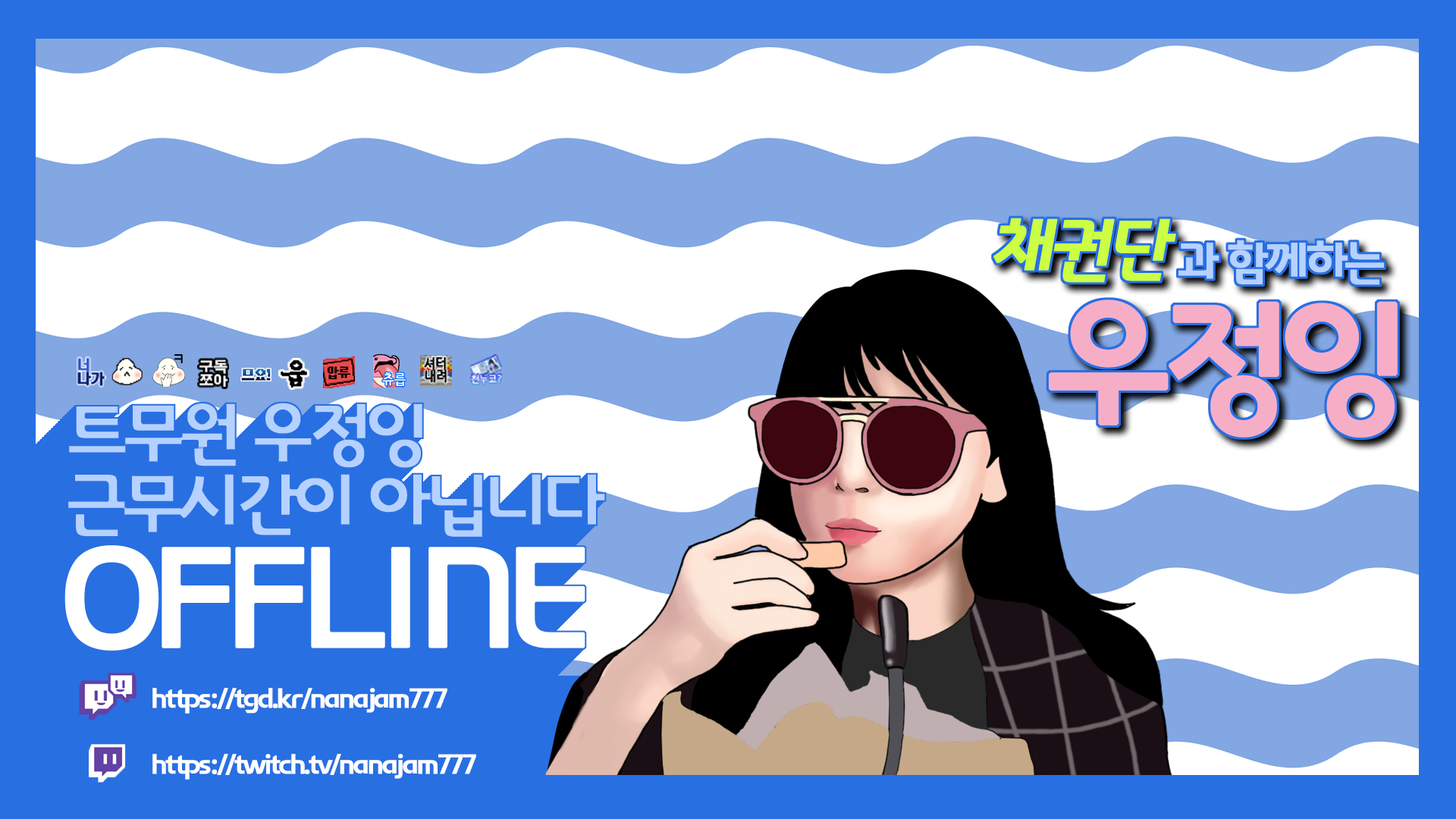
<style>
.page{position:relative;width:1456px;height:819px;background:#ffffff}
.page>*{position:absolute;margin:0}
.t1{font:68.2px "InterGTB";letter-spacing:-0.1em;color:#ccfe44;font-weight:bold;font-style:italic}
.t2{font:45.5px "InterGTB";letter-spacing:-0.1em;color:#b5d1ff;font-weight:bold}
.t3{font:141px "InterGTB";letter-spacing:-0.1em;color:#f6aec7;font-weight:bold}
.t4{font:68.2px "InterGTB";letter-spacing:-0.1em;color:#b5d1ff;font-weight:bold}
.t5{font:141px "InterGTB";letter-spacing:-0.1em;color:#ffffff;font-weight:bold}
.t6{font:27.3px "InterGTB";letter-spacing:-0.1em;color:#ffffff;font-weight:bold}
</style>
<div class="page">
<p class="t1" style="left:993px;top:218px;width:183px;height:65px">채권단</p>
<p class="t2" style="left:1178px;top:240px;width:206px;height:45px">과 함께하는</p>
<p class="t3" style="left:1048px;top:300px;width:350px;height:138px">우정잉</p>
<p class="t4" style="left:68px;top:402px;width:355px;height:67px">트무원 우정잉</p>
<p class="t4" style="left:67px;top:473px;width:539px;height:65px">근무시간이 아닙니다</p>
<p class="t5" style="left:64px;top:544px;width:522px;height:107px">OFFLINE</p>
<p class="t6" style="left:152px;top:688px;width:295px;height:26px">https://tgd.kr/nanajam777</p>
<p class="t6" style="left:152px;top:754px;width:324px;height:26px">https://twitch.tv/nanajam777</p>
</div>
